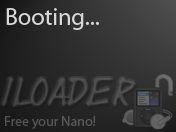
<style>
.page{position:relative;width:176px;height:132px}
.page>*{position:absolute;margin:0}
.t1{font:24px "MyriadPro-Regular";color:#d8d8d8}
.t2{font:30px "Yearsupplyoffairycakes";color:#454545}
.t3{font:14px "MyriadPro-Regular";color:#575757}
</style>
<div class="page">
<p class="t1" style="left:6px;top:8px;width:93px;height:22px">Booting...</p>
<p class="t2" style="left:2px;top:78px;width:134px;height:29px">iLoader</p>
<p class="t3" style="left:5px;top:116px;width:91px;height:13px">Free your Nano!</p>
</div>
